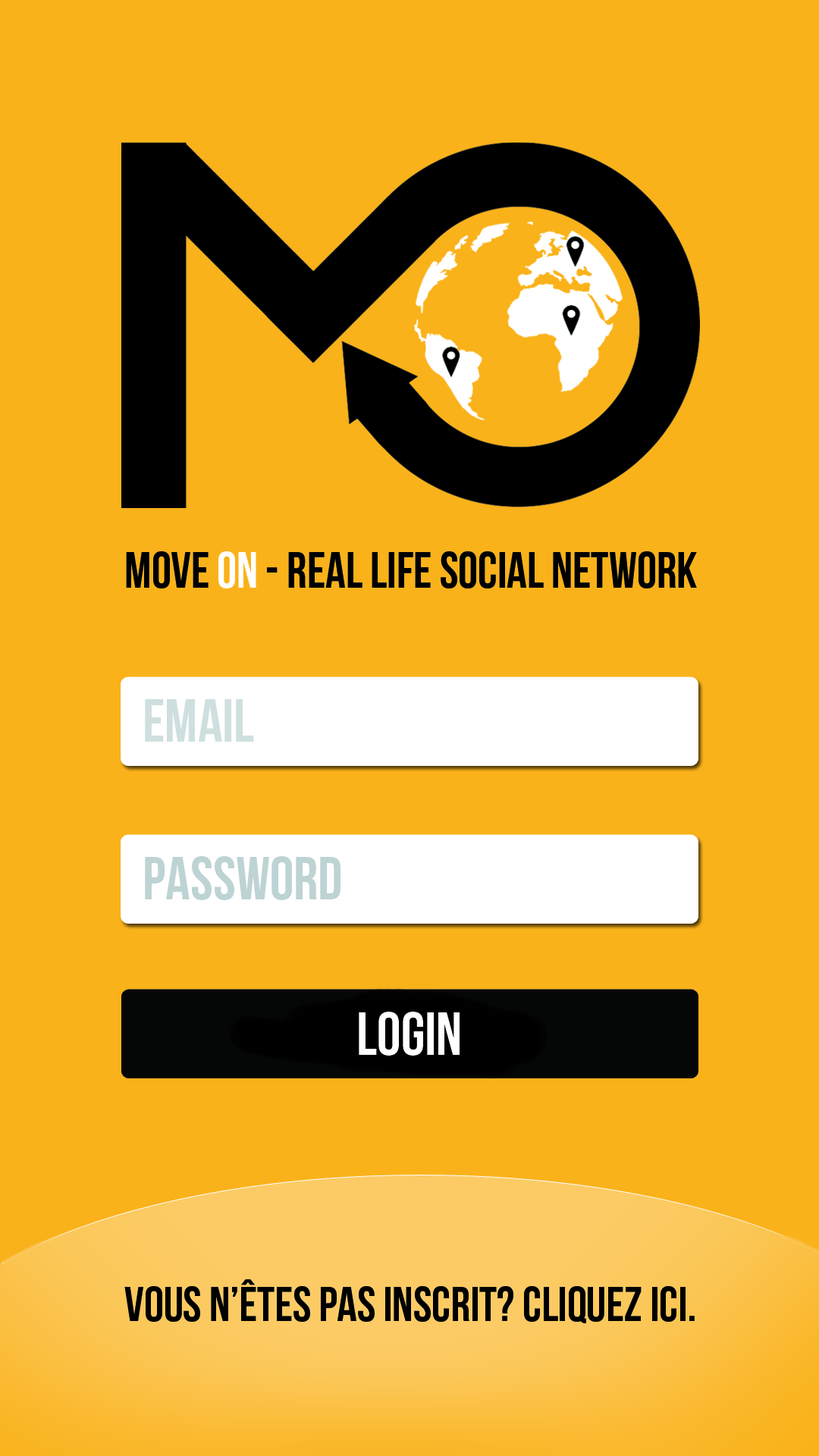
<style>
.page{position:relative;width:819px;height:1456px;background:#fab21a}
.page>*{position:absolute;margin:0}
.t1{font:60.7px "BebasNeue";color:#cfdfdf}
.t2{font:60.7px "BebasNeue";color:#bfd3d3}
.t3{font:60.7px "BebasNeue";color:#ffffff}
.t4{font:49px "BebasNeue";color:#000000}
</style>
<div class="page">
<p class="t1" style="left:145px;top:699px;width:109px;height:43px">EMAIL</p>
<p class="t2" style="left:145px;top:856px;width:195px;height:44px">PASSWORD</p>
<p class="t3" style="left:359px;top:1012px;width:101px;height:44px">LOGIN</p>
<p class="t4" style="left:124px;top:1279px;width:571px;height:44px">Vous n’êtes pas inscrit? Cliquez ici.</p>
</div>
